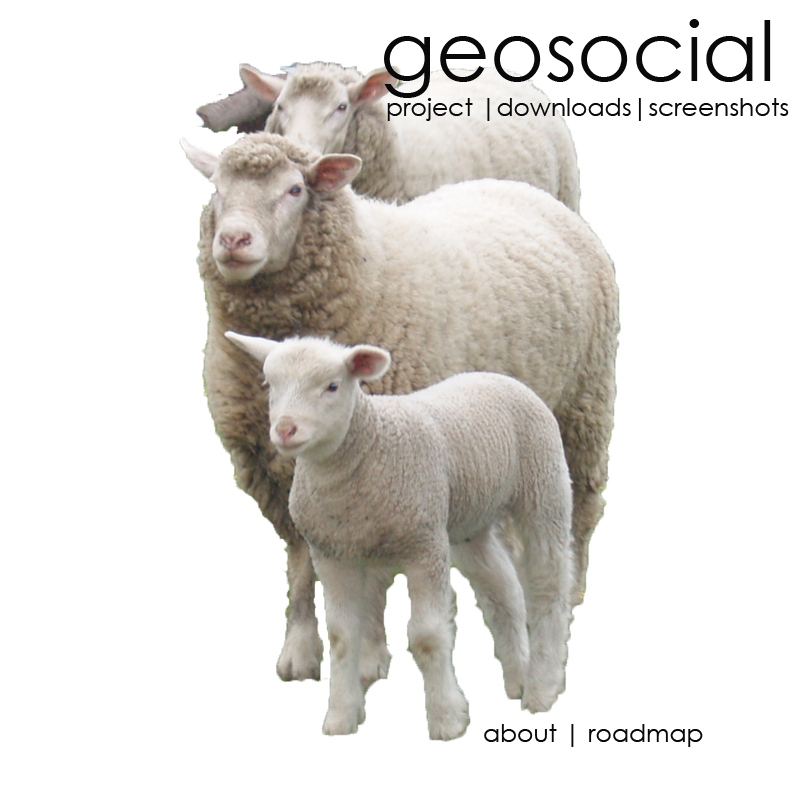
<style>
.page{position:relative;width:800px;height:800px;background:#ffffff}
.page>*{position:absolute;margin:0}
.t1{font:83.4px "CenturyGothic";color:#090909}
.t2{font:25px "CenturyGothic";color:#090909}
</style>
<div class="page">
<p class="t1" style="left:384px;top:19px;width:387px;height:79px">geosocial</p>
<p class="t2" style="left:387px;top:98px;width:402px;height:23px">project |downloads|screenshots</p>
<p class="t2" style="left:484px;top:724px;width:219px;height:23px">about | roadmap</p>
</div>
